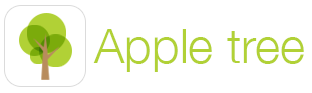
<style>
.page{position:relative;width:312px;height:93px;background:#ffffff}
.page>*{position:absolute;margin:0}
.t1{font:48px "HelveticaNeue-Light";color:#b1d136}
</style>
<div class="page">
<p class="t1" style="left:93px;top:29px;width:211px;height:43px">Apple tree</p>
</div>
